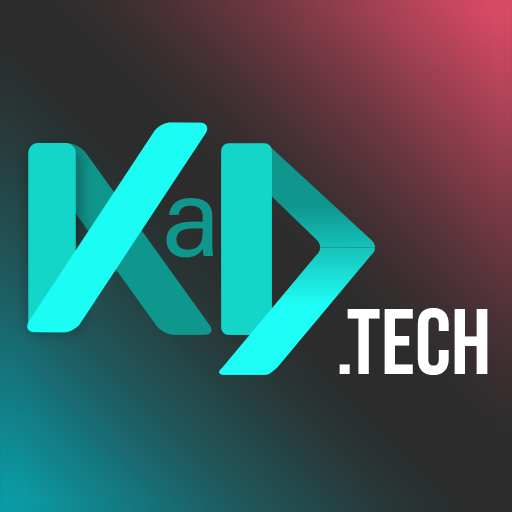
<style>
.page{position:relative;width:512px;height:512px}
.page>*{position:absolute;margin:0}
.t1{font:93.5px "BebasNeue-Bold";color:#ffffff}
</style>
<div class="page">
<p class="t1" style="left:339px;top:308px;width:149px;height:67px">.tech</p>
</div>
